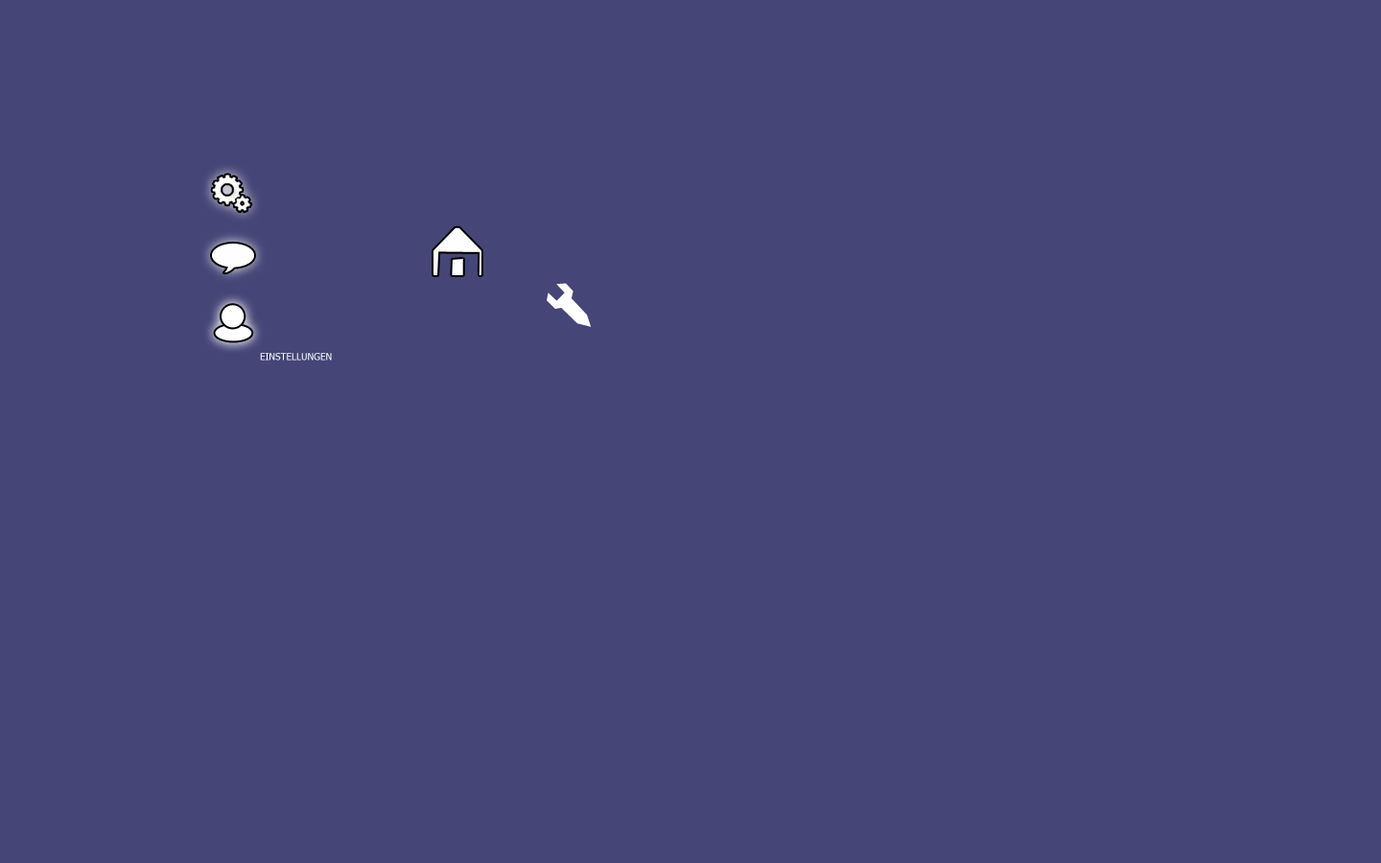
<style>
.page{position:relative;width:1381px;height:863px;background:#454577}
.page>*{position:absolute;margin:0}
.t1{font:9.6px "Tahoma";color:#fefefe}
</style>
<div class="page">
<p class="t1" style="left:260px;top:353px;width:72px;height:8px">EINSTELLUNGEN</p>
</div>
